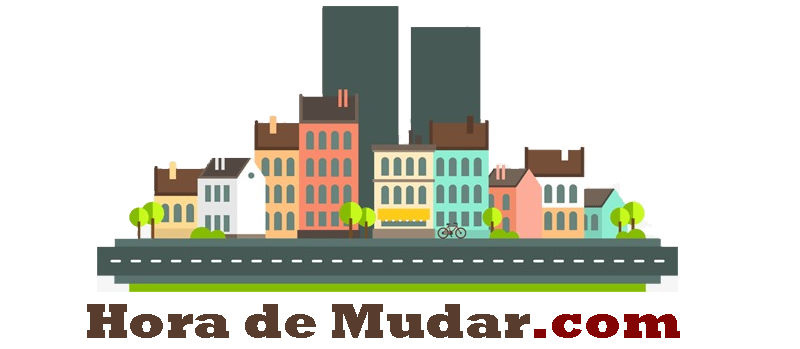
<style>
.page{position:relative;width:800px;height:349px;background:#ffffff}
.page>*{position:absolute;margin:0}
.t1{font:50px "Rockwell-ExtraBold";color:#583c2e}
.t2{font:50px "Rockwell-ExtraBold";color:#840303}
</style>
<div class="page">
<p class="t1" style="left:87px;top:304px;width:593px;height:34px">Hora de Mudar<span class="t2">.com</span></p>
</div>
